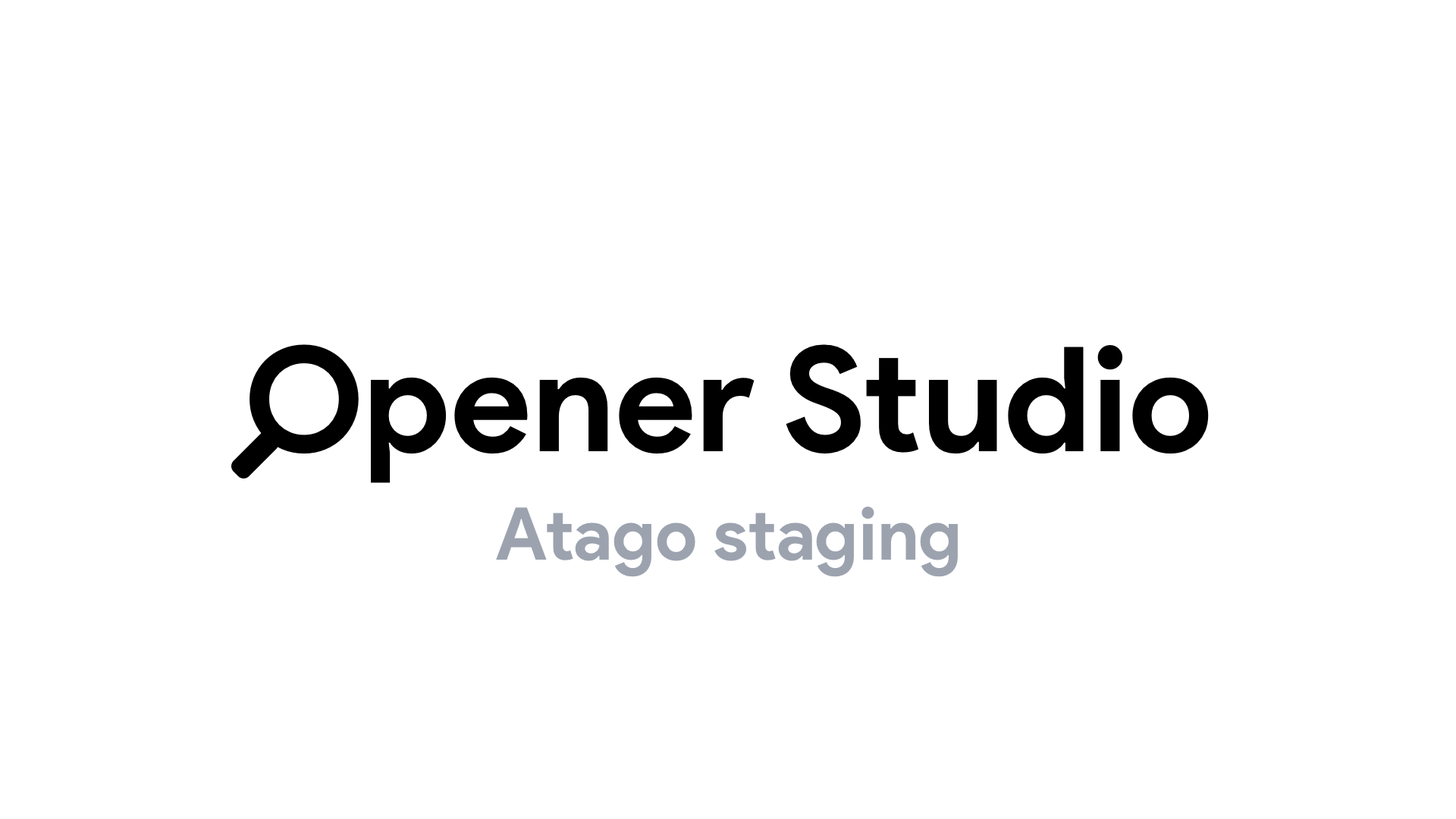
<style>
.page{position:relative;width:1456px;height:819px;background:#ffffff}
.page>*{position:absolute;margin:0}
.t1{font:145.6px "ProductSans-Bold";color:#000000}
.t2{font:72.8px "ProductSans-Bold";color:#9ca3af}
</style>
<div class="page">
<p class="t1" style="left:249px;top:344px;width:960px;height:139px">Opener Studio</p>
<p class="t2" style="left:496px;top:507px;width:462px;height:70px">Atago staging</p>
</div>
